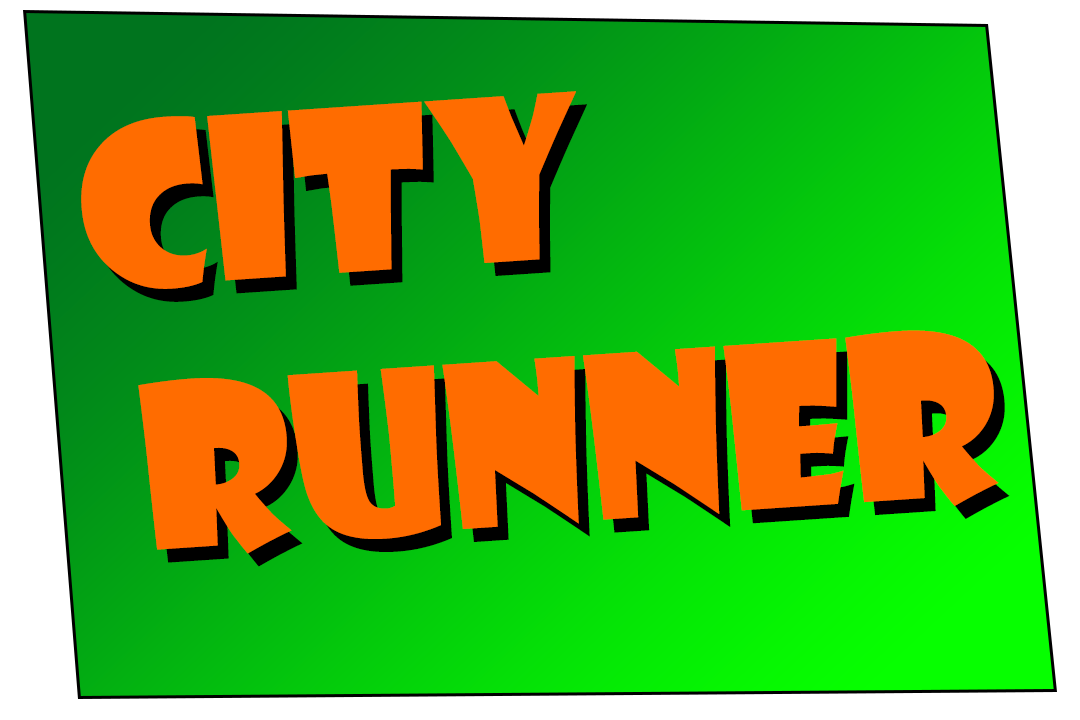
<style>
.page{position:relative;width:1080px;height:720px;background:#ff6c00}
.page>*{position:absolute;margin:0}
.t1{font:220px "ShowcardGothic-Reg";color:#ff6c00}
</style>
<div class="page">
<p class="t1" style="left:81px;top:91px;width:918px;height:463px;rotate:-4deg">City<br> Runner</p>
<p class="t1" style="left:92px;top:104px;width:918px;height:463px;rotate:-4deg">city<br> Runner</p>
</div>
